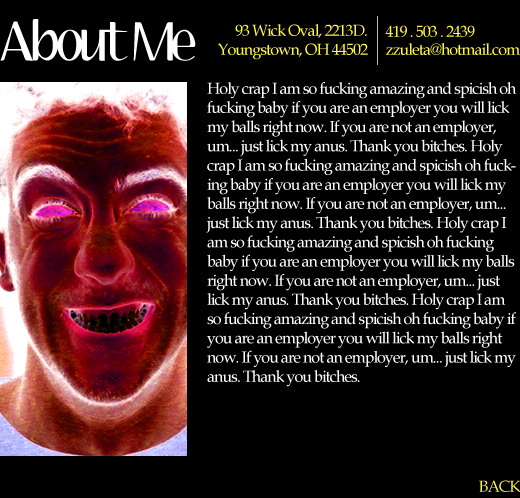
<style>
.page{position:relative;width:520px;height:498px;background:#000000}
.page>*{position:absolute;margin:0}
.t1{font:48px "Aubrey";letter-spacing:-0.06em;color:#ffffff}
.t2{font:16px "BookAntiqua";letter-spacing:-0.06em;color:#fff449}
.t3{font:16px "BookAntiqua";letter-spacing:-0.06em;color:#ffffff}
</style>
<div class="page">
<p class="t1" style="left:0px;top:19px;width:196px;height:42px">About Me</p>
<p class="t2" style="left:218px;top:24px;width:150px;height:36px;text-align:right">93 Wick Oval, 2213D. <br>Youngstown, OH 44502</p>
<p class="t2" style="left:385px;top:25px;width:90px;height:12px">419 . 503 . 2439</p>
<p class="t2" style="left:386px;top:43px;width:134px;height:12px">zzuleta@hotmail.com</p>
<p class="t3" style="left:206px;top:82px;width:311px;height:305px">Holy crap I am so fucking amazing and spicish oh fucking baby if you are an employer you will lick my balls right now. If you are not an employer, um... just lick my anus. Thank you bitches. Holy crap I am so fucking amazing and spicish oh fucking baby if you are an employer you will lick my balls right now. If you are not an employer, um... just lick my anus. Thank you bitches. Holy crap I am so fucking amazing and spicish oh fucking baby if you are an employer you will lick my balls right now. If you are not an employer, um... just lick my anus. Thank you bitches. Holy crap I am so fucking amazing and spicish oh fucking baby if you are an employer you will lick my balls right now. If you are not an employer, um... just lick my anus. Thank you bitches.</p>
<p class="t2" style="left:479px;top:480px;width:41px;height:12px">BACK</p>
</div>
